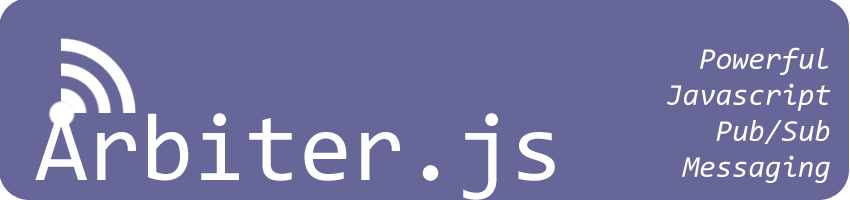
<style>
.page{position:relative;width:850px;height:200px;background:#666699}
.page>*{position:absolute;margin:0}
.t1{font:30px "Consolas-Italic";color:#ffffff}
.t2{font:96px "Consolas";color:#ffffff}
</style>
<div class="page">
<p class="t1" style="left:666px;top:47px;width:165px;height:136px;text-align:right">Powerful<br>Javascript<br>Pub/Sub<br>Messaging</p>
<p class="t2" style="left:35px;top:113px;width:520px;height:87px">Arbiter.js</p>
</div>
